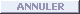
<style>
.page{position:relative;width:80px;height:14px;background:#e9eff8}
.page>*{position:absolute;margin:0}
.t1{font:10px "Tahoma-Bold";color:#9694b2;text-transform:uppercase}
</style>
<div class="page">
<p class="t1" style="left:17px;top:3px;width:47px;height:7px">ANNULER</p>
</div>
